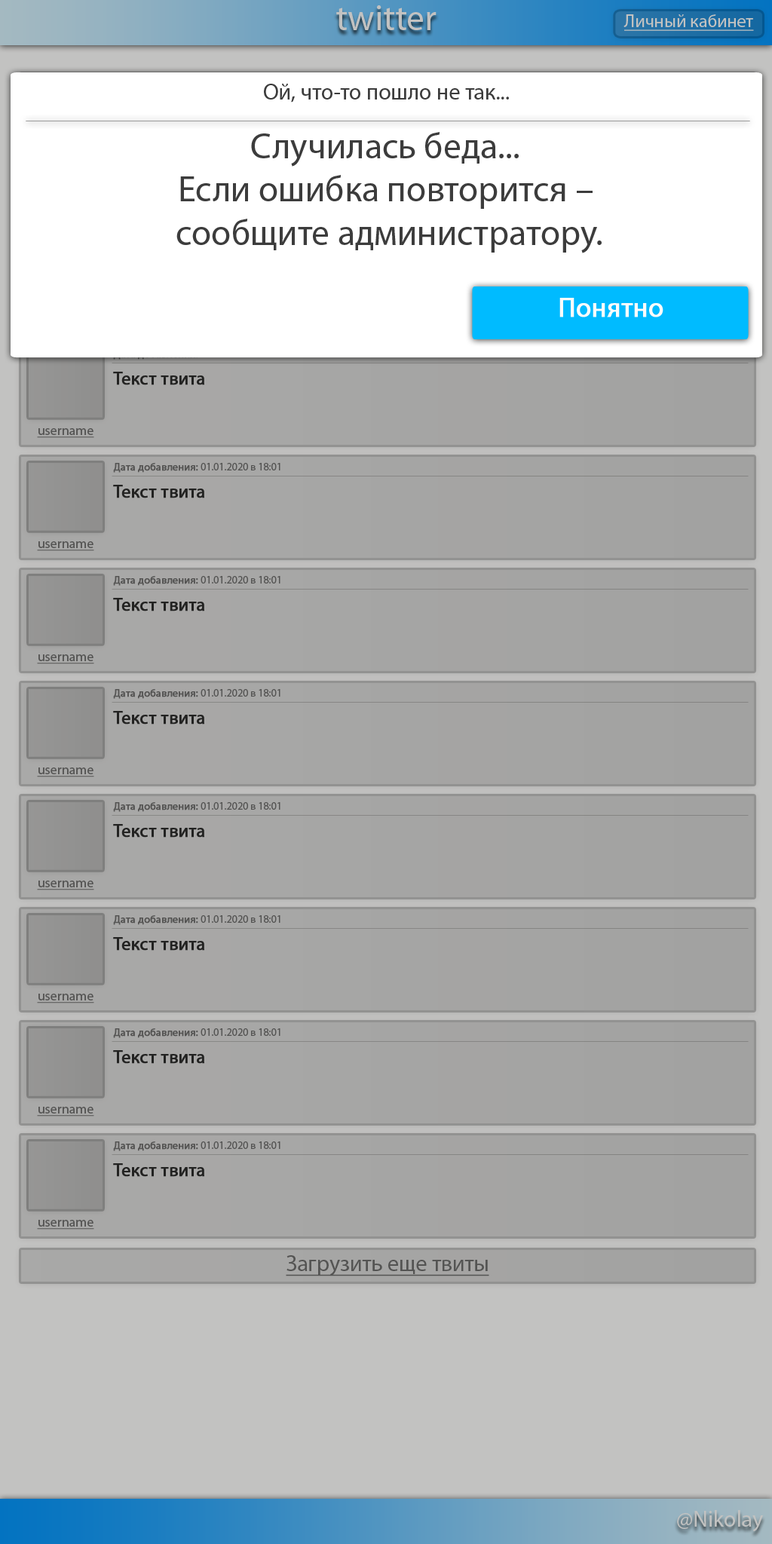
<style>
.page{position:relative;width:772px;height:1544px}
.page>*{position:absolute;margin:0}
.t1{font:36.2px "MyriadPro-Regular";color:#c2c2c1}
.t2{font:18.1px "MyriadPro-Regular";color:#c2c2c1;text-decoration:underline}
.t3{font:22.6px "MyriadPro-Regular";color:#3c3c3c}
.t4{font:36.2px "MyriadPro-Regular";color:#3c3c3c}
.t5{font:27.1px "MyriadPro-Regular";color:#fffbfb;font-weight:bold}
.t6{font:18.1px "MyriadPro-Regular";color:#111111;font-weight:bold}
.t7{font:13.6px "MyriadPro-Regular";color:#696969;text-decoration:underline}
.t8{font:10.6px "MyriadPro-Regular";color:#696969}
.t9{font:10.6px "MyriadPro-Regular";color:#696969;font-weight:bold}
.t10{font:22.6px "MyriadPro-Regular";color:#545453;text-decoration:underline}
.t11{font:22.6px "MyriadPro-Regular";color:#c2c2c1}
</style>
<div class="page">
<p class="t1" style="left:336px;top:5px;width:101px;height:25px">twitter</p>
<p class="t2" style="left:624px;top:14px;width:130px;height:17px">Личный кабинет</p>
<p class="t3" style="left:264px;top:84px;width:245px;height:19px">Ой, что-то пошло не так...</p>
<p class="t4" style="left:176px;top:132px;width:426px;height:121px;text-align:center">Случилась беда... <br>Если ошибка повторится –<br> сообщите администратору.</p>
<p class="t5" style="left:560px;top:298px;width:104px;height:19px">Понятно</p>
<p class="t6" style="left:113px;top:372px;width:91px;height:13px">Текст твита</p>
<p class="t7" style="left:37px;top:428px;width:57px;height:10px">username</p>
<p class="t8" style="left:113px;top:463px;width:168px;height:10px"><span class="t9">Дата добавления:</span> 01.01.2020 в 18:01</p>
<p class="t6" style="left:113px;top:485px;width:91px;height:13px">Текст твита</p>
<p class="t7" style="left:37px;top:541px;width:57px;height:10px">username</p>
<p class="t8" style="left:113px;top:576px;width:168px;height:10px"><span class="t9">Дата добавления:</span> 01.01.2020 в 18:01</p>
<p class="t6" style="left:113px;top:598px;width:91px;height:14px">Текст твита</p>
<p class="t7" style="left:37px;top:655px;width:57px;height:9px">username</p>
<p class="t8" style="left:113px;top:689px;width:168px;height:10px"><span class="t9">Дата добавления:</span> 01.01.2020 в 18:01</p>
<p class="t6" style="left:113px;top:711px;width:91px;height:14px">Текст твита</p>
<p class="t7" style="left:37px;top:768px;width:57px;height:9px">username</p>
<p class="t8" style="left:113px;top:802px;width:168px;height:10px"><span class="t9">Дата добавления:</span> 01.01.2020 в 18:01</p>
<p class="t6" style="left:113px;top:824px;width:91px;height:14px">Текст твита</p>
<p class="t7" style="left:37px;top:881px;width:57px;height:10px">username</p>
<p class="t8" style="left:113px;top:915px;width:168px;height:10px"><span class="t9">Дата добавления:</span> 01.01.2020 в 18:01</p>
<p class="t6" style="left:113px;top:937px;width:91px;height:14px">Текст твита</p>
<p class="t7" style="left:37px;top:994px;width:57px;height:10px">username</p>
<p class="t8" style="left:113px;top:1029px;width:168px;height:9px"><span class="t9">Дата добавления:</span> 01.01.2020 в 18:01</p>
<p class="t6" style="left:113px;top:1050px;width:91px;height:14px">Текст твита</p>
<p class="t7" style="left:37px;top:1107px;width:57px;height:10px">username</p>
<p class="t8" style="left:113px;top:1142px;width:168px;height:9px"><span class="t9">Дата добавления:</span> 01.01.2020 в 18:01</p>
<p class="t6" style="left:113px;top:1164px;width:91px;height:13px">Текст твита</p>
<p class="t7" style="left:37px;top:1220px;width:57px;height:10px">username</p>
<p class="t10" style="left:286px;top:1255px;width:203px;height:22px">Загрузить еще твиты</p>
<p class="t11" style="left:677px;top:1510px;width:86px;height:22px">@Nikolay</p>
</div>
